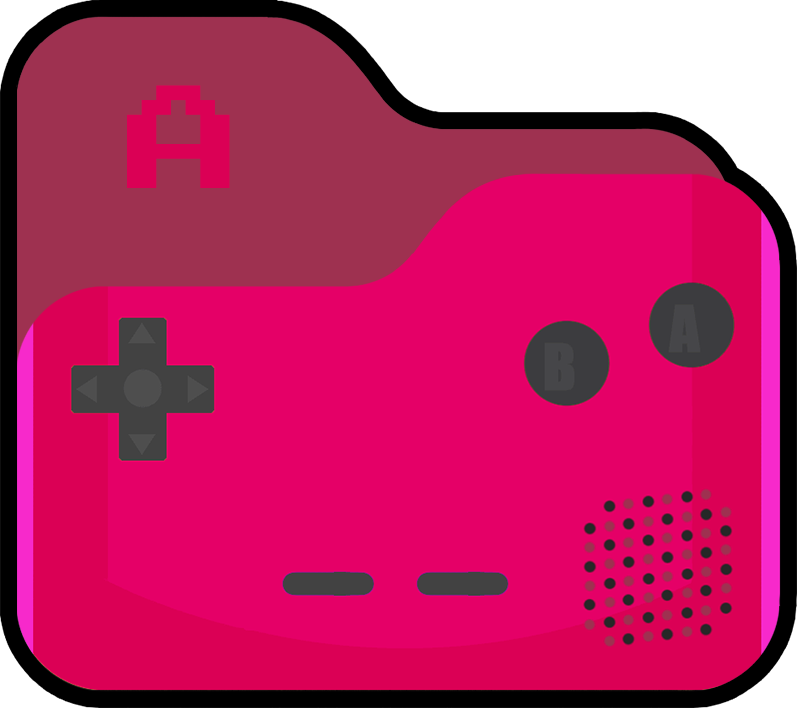
<style>
.page{position:relative;width:797px;height:708px;background:#e50067}
.page>*{position:absolute;margin:0}
.t1{font:150px "PixelEmulator";color:#db0055}
</style>
<div class="page">
<p class="t1" style="left:127px;top:85px;width:103px;height:103px">A</p>
</div>
